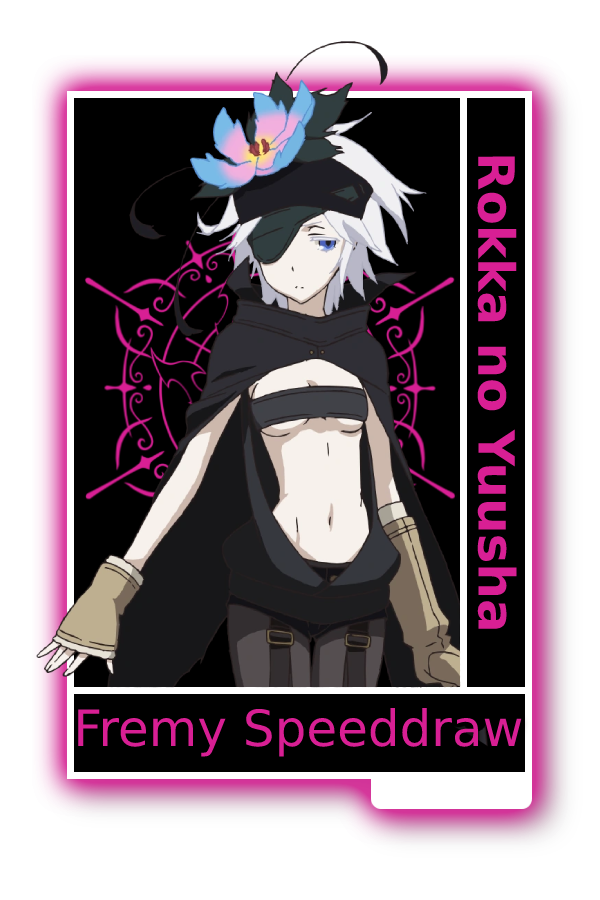
<style>
.page{position:relative;width:600px;height:900px;background:#ffffff}
.page>*{position:absolute;margin:0}
.t1{font:50px "MADETOMMY-Bold";color:#d81f94}
.t2{font:50px "CoolveticaRg-Regular";color:#d81f94}
</style>
<div class="page">
<p class="t1" style="left:477px;top:156px;width:40px;height:473px;rotate:90deg">Rokka no Yuusha</p>
<p class="t2" style="left:78px;top:708px;width:444px;height:49px">Fremy Speeddraw</p>
</div>
